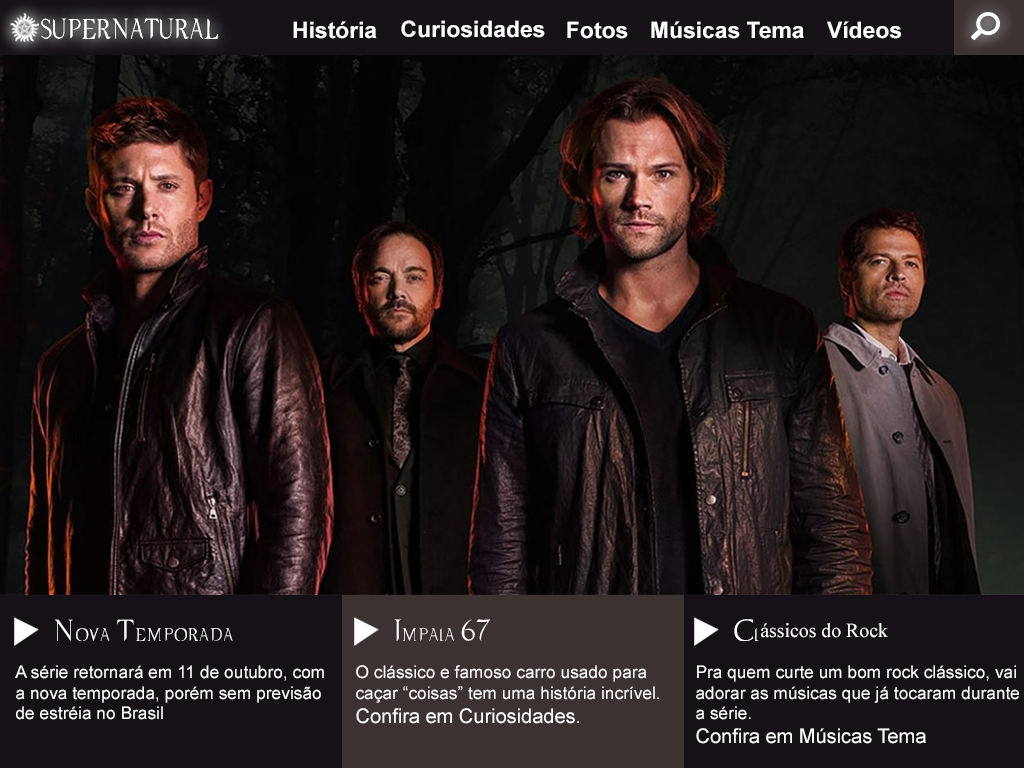
<style>
.page{position:relative;width:1024px;height:768px}
.page>*{position:absolute;margin:0}
.t1{font:18.7px "SupernaturalKnight";color:#ffffff;scale:0.88 1}
.t2{font:22.5px "Arial-BoldMT";color:#ffffff}
.t3{font:20px "SupernaturalKnight";color:#ffffff}
.t4{font:20px "TimesNewRomanPSMT";color:#ffffff}
.t5{font:17.3px "ArialMT";color:#ffffff}
.t6{font:20px "ArialMT";color:#ffffff}
</style>
<div class="page">
<p class="t1" style="left:41px;top:18px;width:177px;height:21px">SUPERNATURAL</p>
<p class="t2" style="left:293px;top:21px;width:84px;height:18px">História</p>
<p class="t2" style="left:401px;top:20px;width:144px;height:18px">Curiosidades</p>
<p class="t2" style="left:567px;top:21px;width:61px;height:18px">Fotos</p>
<p class="t2" style="left:651px;top:21px;width:153px;height:18px">Músicas Tema</p>
<p class="t2" style="left:827px;top:21px;width:74px;height:18px">Vídeos</p>
<p class="t3" style="left:54px;top:619px;width:179px;height:22px">Nova Temporada</p>
<p class="t3" style="left:394px;top:619px;width:96px;height:22px">Impala 67</p>
<p class="t4" style="left:734px;top:619px;width:154px;height:22px"><span class="t3">Cl</span>ássicos do Rock</p>
<p class="t5" style="left:15px;top:665px;width:309px;height:55px">A série retornará em 11 de outubro, com<br>a nova temporada, porém sem previsão<br>de estréia no Brasil</p>
<p class="t5" style="left:356px;top:665px;width:303px;height:59px">O clássico e famoso carro usado para<br>caçar “coisas” tem uma história incrível.<br><span class="t6">Confira em Curiosidades.</span></p>
<p class="t5" style="left:696px;top:665px;width:323px;height:79px">Pra quem curte um bom rock clássico, vai<br>adorar as músicas que já tocaram durante<br>a série.<br><span class="t6">Confira em Músicas Tema</span></p>
</div>
